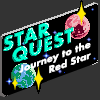
<style>
.page{position:relative;width:100px;height:100px;background:#333333}
.page>*{position:absolute;margin:0}
.t1{font:17.8px "Futura-Bold";color:#00ffd2;scale:1.06 1}
.t2{font:9.2px "Futura-Bold";color:#ffffff;scale:1.06 1}
</style>
<div class="page">
<p class="t1" style="left:3px;top:22px;width:48px;height:29px;rotate:-20deg">STAR</p>
<p class="t1" style="left:12px;top:27px;width:62px;height:35px;rotate:-20deg">QUEST</p>
<p class="t2" style="left:19px;top:42px;width:72px;height:32px;text-align:right;rotate:-20deg">Journey to the<br>Red Star</p>
</div>
